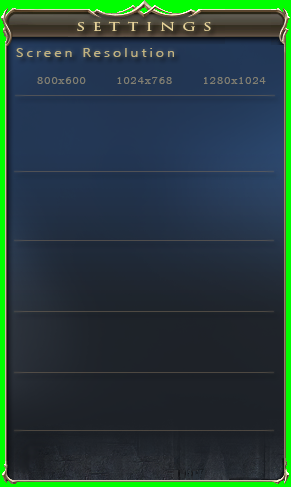
<style>
.page{position:relative;width:291px;height:487px}
.page>*{position:absolute;margin:0}
.t1{font:13.5px "TrajanPro3-Regular";letter-spacing:0.4em;color:#e6d299;scale:1.33 1}
.t2{font:12px "LaoUI";letter-spacing:0.2em;color:#c3b481;scale:1.2 1}
.t3{font:10px "BookmanOldStyle";letter-spacing:0.1em;color:#828072}
</style>
<div class="page">
<p class="t1" style="left:77px;top:21px;width:134px;height:10px">settings</p>
<p class="t2" style="left:16px;top:48px;width:158px;height:9px">Screen Resolution</p>
<p class="t3" style="left:37px;top:77px;width:229px;height:7px">800x600       1024x768       1280x1024</p>
</div>
